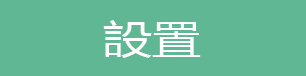
<style>
.page{position:relative;width:306px;height:76px;background:#5fb893}
.page>*{position:absolute;margin:0}
.t1{font:40.4px "MicrosoftYaHei";color:#ffffff;scale:1.21 1}
</style>
<div class="page">
<p class="t1" style="left:103px;top:20px;width:98px;height:38px">設置</p>
</div>
